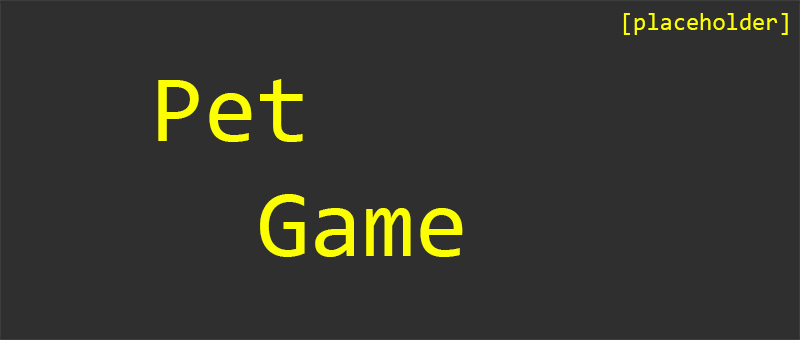
<style>
.page{position:relative;width:800px;height:340px;background:#2f2f2f}
.page>*{position:absolute;margin:0}
.t1{font:24px "Consolas";color:#fcff01}
.t2{font:96px "Consolas";color:#fcff01}
</style>
<div class="page">
<p class="t1" style="left:623px;top:13px;width:165px;height:22px">[placeholder]</p>
<p class="t2" style="left:158px;top:79px;width:305px;height:178px">Pet<br>  Game</p>
</div>
